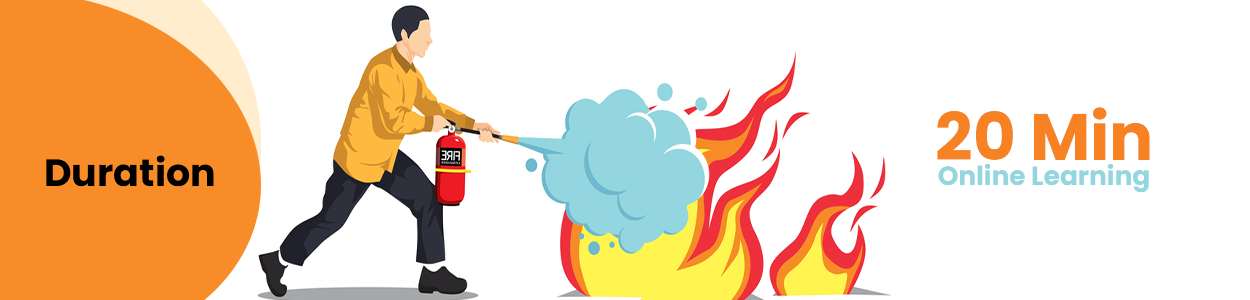
<style>
.page{position:relative;width:1250px;height:300px;background:#ffffff}
.page>*{position:absolute;margin:0}
.t1{font:65.7px "Poppins-Bold";color:#f68224}
.t2{font:38px "Poppins-Bold";color:#000000}
.t3{font:26.3px "Poppins-Bold";color:#93d6df}
</style>
<div class="page">
<p class="t1" style="left:937px;top:107px;width:213px;height:53px">20 Min</p>
<p class="t2" style="left:46px;top:155px;width:168px;height:32px">Duration</p>
<p class="t3" style="left:938px;top:164px;width:211px;height:29px">Online Learning</p>
</div>
